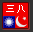
<style>
.page{position:relative;width:33px;height:32px;background:#f20000}
.page>*{position:absolute;margin:0}
.t1{font:10.4px "SimSun";color:#ffffff}
</style>
<div class="page">
<p class="t1" style="left:6px;top:5px;width:19px;height:8px">三八</p>
</div>
